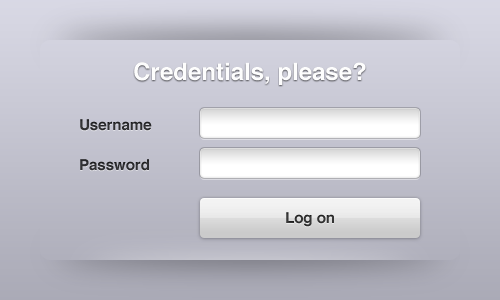
<style>
.page{position:relative;width:500px;height:300px}
.page>*{position:absolute;margin:0}
.t1{font:24px "Helvetica-Bold";color:#ffffff}
.t2{font:15px "Helvetica-Bold";color:#2f2f31}
.t3{font:15px "Helvetica-Bold";color:#2c2c2f}
.t4{font:15px "Helvetica-Bold";color:#343434}
</style>
<div class="page">
<p class="t1" style="left:134px;top:62px;width:232px;height:23px">Credentials, please?</p>
<p class="t2" style="left:80px;top:119px;width:72px;height:12px">Username</p>
<p class="t3" style="left:80px;top:159px;width:69px;height:12px">Password</p>
<p class="t4" style="left:286px;top:212px;width:48px;height:15px">Log on</p>
</div>
